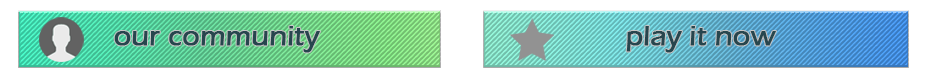
<style>
.page{position:relative;width:925px;height:82px;background:#ffffff}
.page>*{position:absolute;margin:0}
.t1{font:28.8px "ErasITC-Medium";color:#27464e;font-weight:bold}
</style>
<div class="page">
<p class="t1" style="left:114px;top:26px;width:206px;height:27px">our community</p>
<p class="t1" style="left:626px;top:26px;width:150px;height:27px">play it now</p>
</div>
